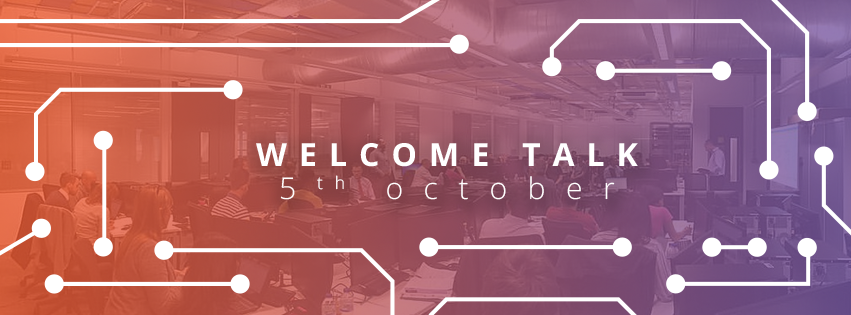
<style>
.page{position:relative;width:851px;height:315px}
.page>*{position:absolute;margin:0}
.t1{font:31.8px "OpenSans-Bold";letter-spacing:0.38em;color:#ffffff}
.t2{font:30.1px "OpenSans-Light";letter-spacing:0.68em;color:#ffffff}
</style>
<div class="page">
<p class="t1" style="left:256px;top:143px;width:382px;height:24px">WELCOME TALK</p>
<p class="t2" style="left:280px;top:175px;width:335px;height:25px">5th october</p>
</div>
